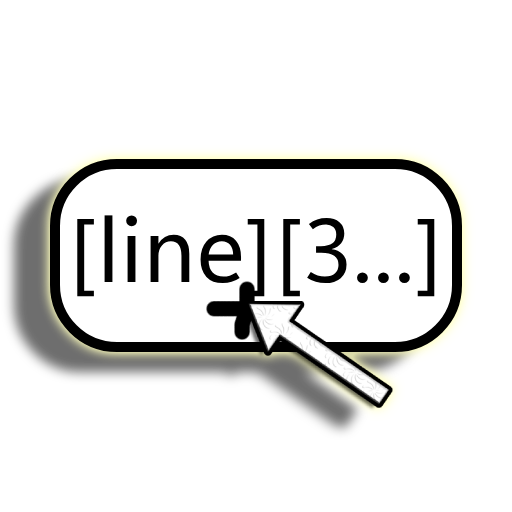
<style>
.page{position:relative;width:512px;height:512px;background:#ffffff}
.page>*{position:absolute;margin:0}
.t1{font:90px "SegoeUIVariable-RegularSmall";color:#000000}
</style>
<div class="page">
<p class="t1" style="left:77px;top:215px;width:358px;height:82px">[line][3...]</p>
</div>
